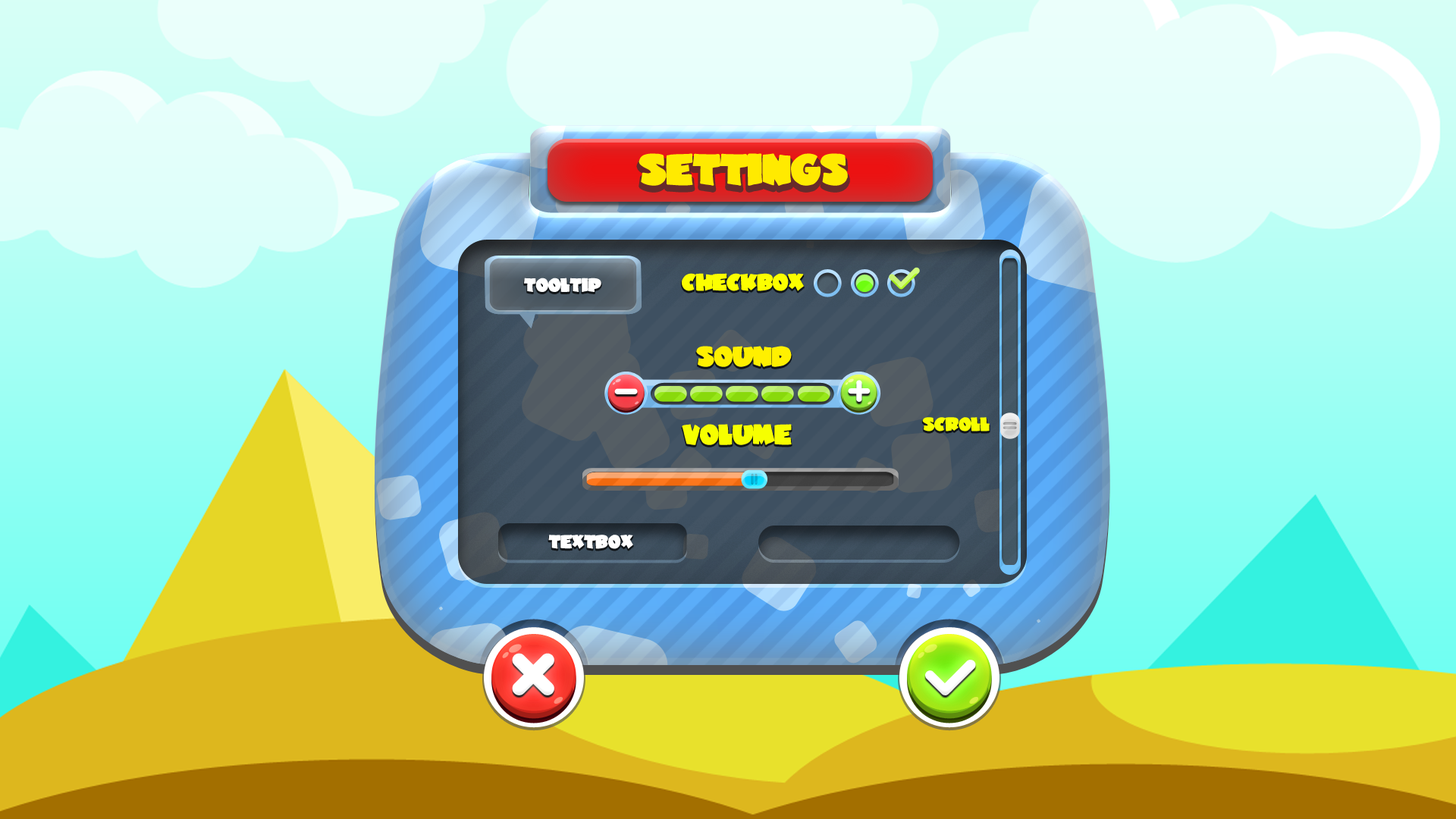
<style>
.page{position:relative;width:1456px;height:819px}
.page>*{position:absolute;margin:0}
.t1{font:31.9px "JuneBug";letter-spacing:-0.02em;color:#ffea00}
.t2{font:13.7px "JuneBug";letter-spacing:-0.02em;color:#ffffff}
.t3{font:17.2px "JuneBug";letter-spacing:-0.02em;color:#fcff00}
.t4{font:20.6px "JuneBug";letter-spacing:-0.02em;color:#fff000}
.t5{font:20.6px "JuneBug";letter-spacing:-0.02em;color:#f6ff00}
.t6{font:13.7px "JuneBug";letter-spacing:-0.02em;color:#f6ff00}
</style>
<div class="page">
<p class="t1" style="left:639px;top:153px;width:209px;height:33px">SETTINGS</p>
<p class="t2" style="left:524px;top:278px;width:77px;height:14px">TOOLTIP</p>
<p class="t3" style="left:682px;top:273px;width:122px;height:18px">CHECKBOX</p>
<p class="t4" style="left:696px;top:346px;width:96px;height:21px">SOUND</p>
<p class="t5" style="left:682px;top:424px;width:110px;height:21px">VOLUME</p>
<p class="t6" style="left:922px;top:417px;width:68px;height:14px">SCROLL</p>
<p class="t2" style="left:548px;top:535px;width:85px;height:14px">TEXTBOX</p>
</div>
